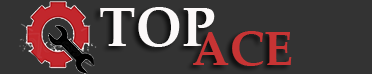
<style>
.page{position:relative;width:372px;height:74px;background:#333333}
.page>*{position:absolute;margin:0}
.t1{font:55px "PalatinoLinotype-Bold";color:#fcf9f9}
.t2{font:48px "PalatinoLinotype-Bold";color:#c73434}
</style>
<div class="page">
<p class="t1" style="left:100px;top:7px;width:115px;height:40px">TOP</p>
<p class="t2" style="left:193px;top:31px;width:99px;height:35px">ACE</p>
</div>
